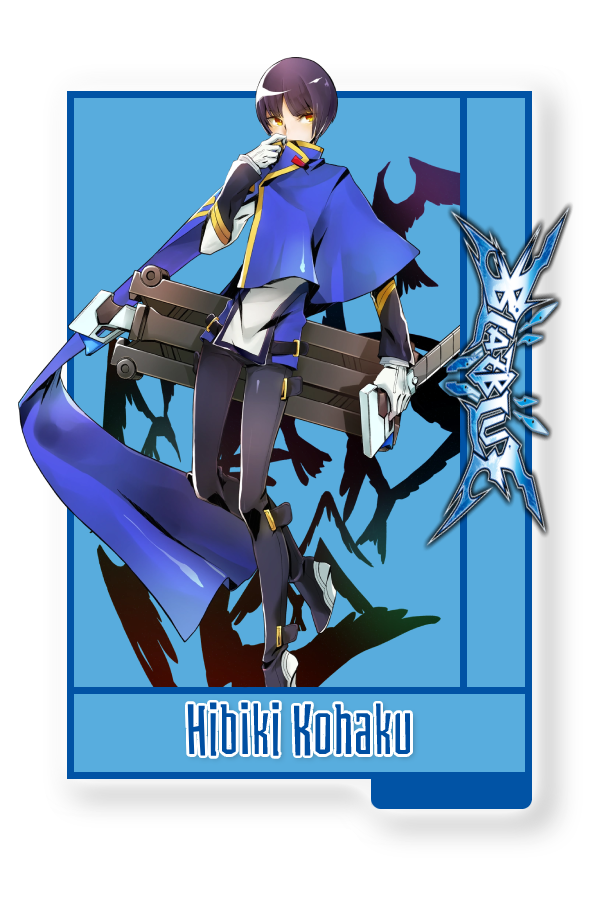
<style>
.page{position:relative;width:600px;height:900px;background:#ffffff}
.page>*{position:absolute;margin:0}
.t1{font:70px "Bahianita-Regular";color:#004fa2}
</style>
<div class="page">
<p class="t1" style="left:187px;top:702px;width:223px;height:54px">Hibiki Kohaku</p>
</div>
